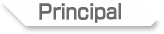
<style>
.page{position:relative;width:164px;height:34px;background:#fffeff}
.page>*{position:absolute;margin:0}
.t1{font:20px "NewRodinPro-B";color:#6c6b6c;scale:0.84 1}
</style>
<div class="page">
<p class="t1" style="left:39px;top:3px;width:82px;height:20px">Principal</p>
</div>
